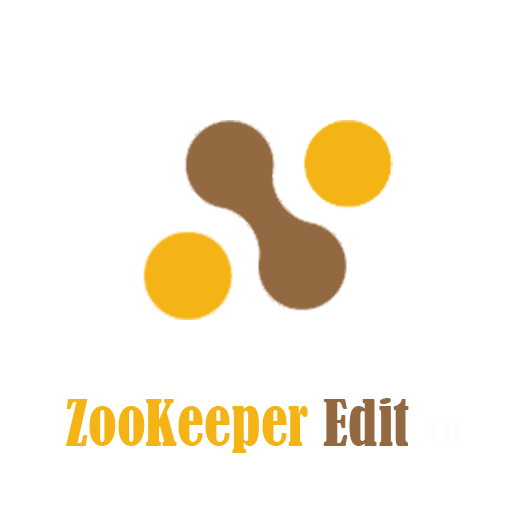
<style>
.page{position:relative;width:521px;height:512px;background:#ffffff}
.page>*{position:absolute;margin:0}
.t1{font:60px "BernardMT-Condensed";color:#f5b416}
.t2{font:60px "BernardMT-Condensed";color:#936941}
</style>
<div class="page">
<p class="t1" style="left:66px;top:398px;width:343px;height:55px">ZooKeeper <span class="t2">Edit</span></p>
</div>
